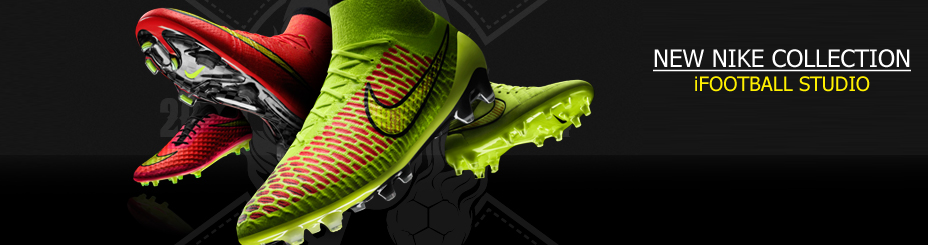
<style>
.page{position:relative;width:928px;height:245px}
.page>*{position:absolute;margin:0}
.t1{font:24px "Tahoma";color:#ffffff;text-decoration:underline}
.t2{font:20px "Tahoma";color:#fff000}
</style>
<div class="page">
<p class="t1" style="left:653px;top:49px;width:258px;height:43px;text-align:center">NEW NIKE COLLECTION<br><span class="t2">iFOOTBALL STUDIO</span></p>
</div>
